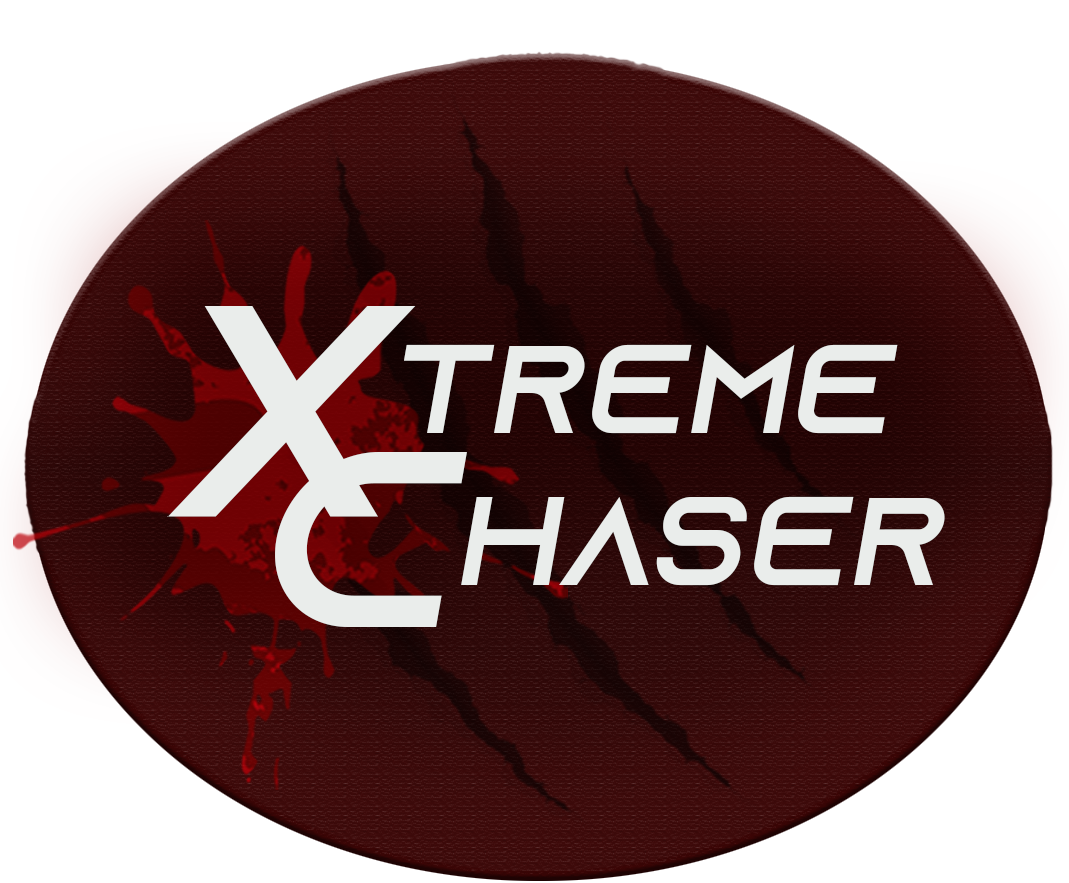
<style>
.page{position:relative;width:1069px;height:883px;background:#ffffff}
.page>*{position:absolute;margin:0}
.t1{font:125px "AzonixRegular";letter-spacing:0.025em;color:#eaedeb;font-style:italic}
.t2{font:300px "AzonixRegular";color:#eaedeb;font-style:italic}
.t3{font:250px "AzonixRegular";letter-spacing:0.025em;color:#eaedeb;font-style:italic}
</style>
<div class="page">
<p class="t1" style="left:167px;top:306px;width:731px;height:211px"><span class="t2">X</span>treme</p>
<p class="t1" style="left:275px;top:452px;width:670px;height:175px"><span class="t3">C</span>haser</p>
</div>
